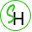
<style>
.page{position:relative;width:32px;height:32px;background:#ffffff}
.page>*{position:absolute;margin:0}
.t1{font:24.4px "TimelessNotesRegular";color:#31c618;scale:0.96 1}
.t2{font:18.7px "PublicaPlay-Regular";color:#000000}
</style>
<div class="page">
<p class="t1" style="left:6px;top:4px;width:9px;height:20px;rotate:-15deg">S</p>
<p class="t2" style="left:13px;top:12px;width:11px;height:13px">H</p>
</div>
